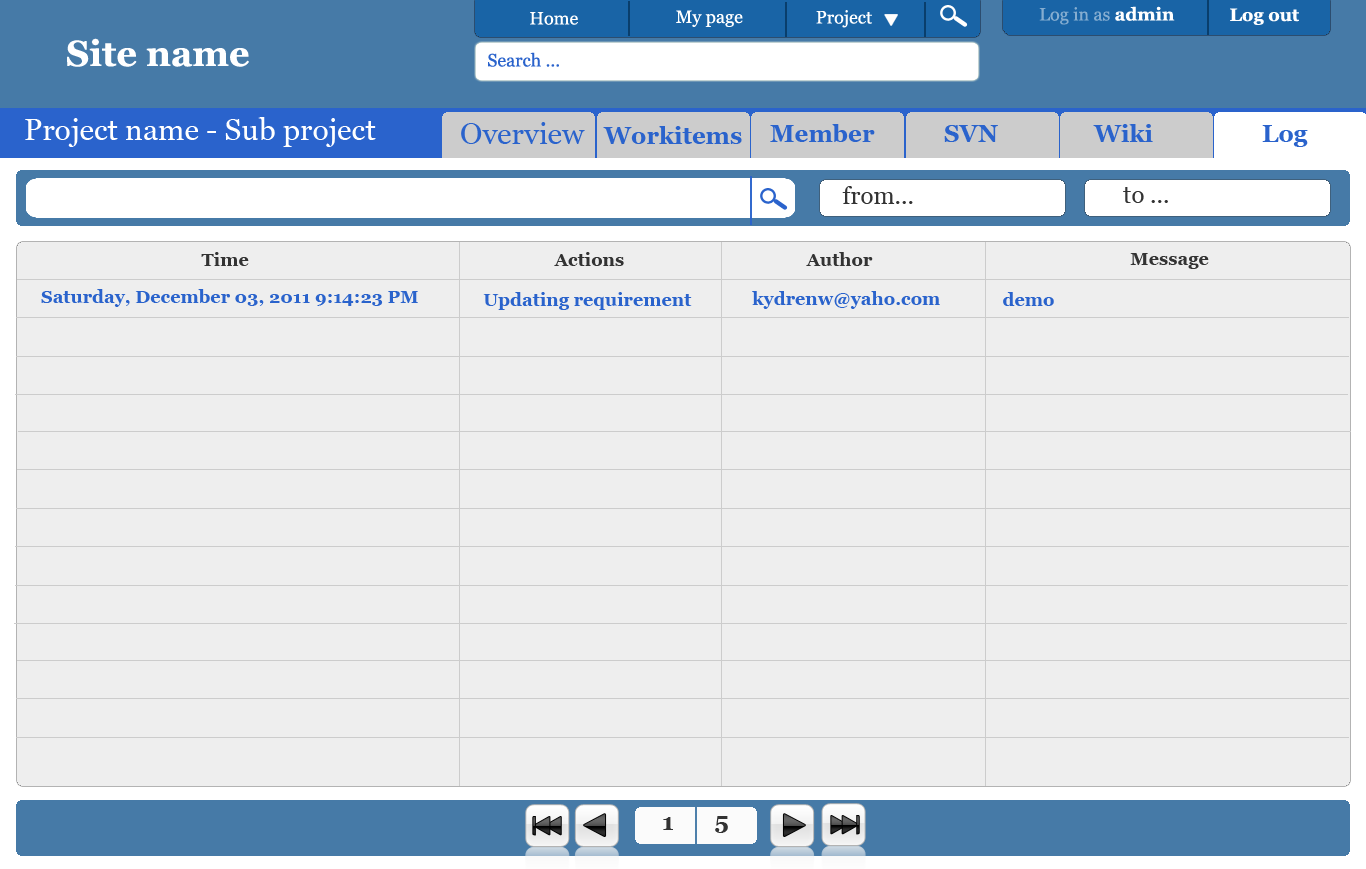
<style>
.page{position:relative;width:1366px;height:869px;background:#eeeeee}
.page>*{position:absolute;margin:0}
.t1{font:18px "Vani";color:#85add0}
.t2{font:18px "Vani-Bold";color:#ffffff}
.t3{font:18px "Vani";color:#ffffff}
.t4{font:36px "Vani-Bold";color:#ffffff}
.t5{font:18px "Vani";color:#2a63cc}
.t6{font:30px "Vani";color:#ffffff}
.t7{font:30px "Vani";color:#2a63cc}
.t8{font:24px "Vani-Bold";color:#2a63cc}
.t9{font:24px "Vani";color:#333333}
.t10{font:18px "Vani-Bold";color:#333333}
.t11{font:18px "Vani-Bold";color:#2a63cc}
.t12{font:24px "Vani-Bold";color:#333333}
</style>
<div class="page">
<p class="t1" style="left:1039px;top:6px;width:136px;height:19px">Log in as <span class="t2">admin</span></p>
<p class="t3" style="left:530px;top:12px;width:48px;height:13px">Home</p>
<p class="t3" style="left:676px;top:10px;width:67px;height:17px">My page</p>
<p class="t3" style="left:816px;top:10px;width:56px;height:18px">Project</p>
<p class="t2" style="left:1230px;top:8px;width:69px;height:17px">Log out</p>
<p class="t4" style="left:67px;top:38px;width:182px;height:29px">Site name</p>
<p class="t5" style="left:488px;top:52px;width:71px;height:15px">Search ...</p>
<p class="t6" style="left:25px;top:117px;width:351px;height:30px">Project name - Sub project</p>
<p class="t7" style="left:461px;top:122px;width:124px;height:22px">Overview</p>
<p class="t8" style="left:603px;top:126px;width:139px;height:18px">Workitems</p>
<p class="t8" style="left:770px;top:124px;width:105px;height:18px">Member</p>
<p class="t8" style="left:944px;top:125px;width:54px;height:17px">SVN</p>
<p class="t8" style="left:1093px;top:124px;width:60px;height:18px">Wiki</p>
<p class="t8" style="left:1262px;top:125px;width:46px;height:22px">Log</p>
<p class="t9" style="left:842px;top:186px;width:71px;height:18px">from...</p>
<p class="t9" style="left:1123px;top:187px;width:45px;height:16px">to ...</p>
<p class="t10" style="left:201px;top:252px;width:48px;height:14px">Time</p>
<p class="t10" style="left:554px;top:252px;width:70px;height:14px">Actions</p>
<p class="t10" style="left:806px;top:252px;width:67px;height:14px">Author</p>
<p class="t10" style="left:1130px;top:253px;width:79px;height:16px">Message</p>
<p class="t11" style="left:41px;top:289px;width:377px;height:18px">Saturday, December 03, 2011 9:14:23 PM</p>
<p class="t11" style="left:483px;top:292px;width:209px;height:18px">Updating requirement</p>
<p class="t11" style="left:752px;top:291px;width:188px;height:18px">kydrenw@yaho.com</p>
<p class="t11" style="left:1003px;top:292px;width:51px;height:14px">demo</p>
<p class="t12" style="left:663px;top:817px;width:10px;height:13px">1</p>
<p class="t12" style="left:715px;top:816px;width:13px;height:17px">5</p>
</div>
